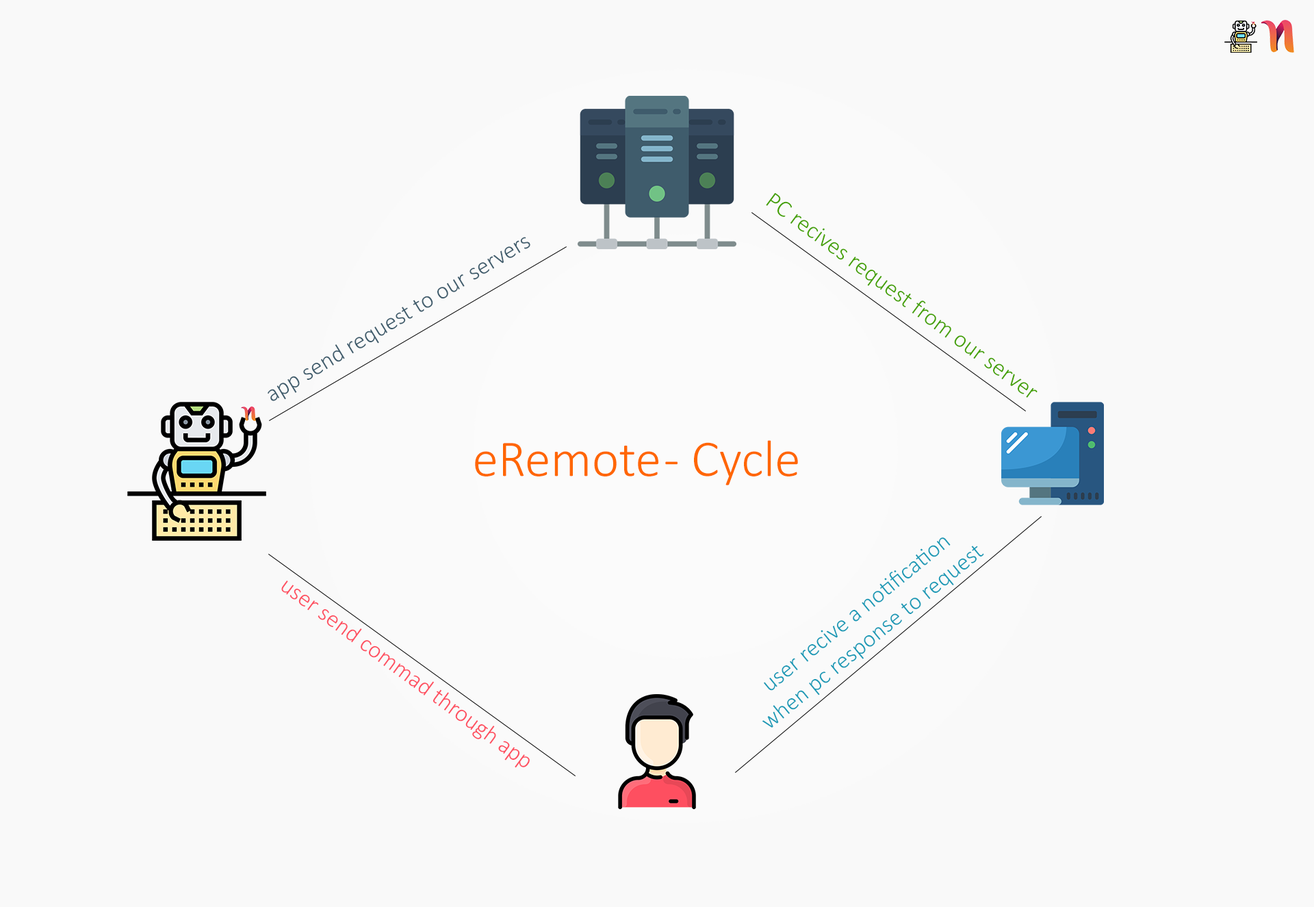
<style>
.page{position:relative;width:1314px;height:907px;background:#f9f9f9}
.page>*{position:absolute;margin:0}
.t1{font:24px "Calibri-Light";color:#44a100}
.t2{font:24px "Calibri-Light";color:#3f5c6c}
.t3{font:52px "Calibri-Light";color:#ff6600}
.t4{font:24px "Calibri-Light";color:#199ab6}
.t5{font:24px "Calibri-Light";color:#fe4f60}
</style>
<div class="page">
<p class="t1" style="left:766px;top:193px;width:272px;height:205px;rotate:36deg">PC recives request from our server</p>
<p class="t2" style="left:268px;top:237px;width:263px;height:164px;rotate:-31deg">app send request to our servers</p>
<p class="t3" style="left:475px;top:440px;width:323px;height:45px">eRemote - Cycle</p>
<p class="t4" style="left:763px;top:537px;width:222px;height:191px;text-align:center;rotate:-39deg">user recive a notification <br>when pc response to request</p>
<p class="t5" style="left:281px;top:581px;width:249px;height:187px;rotate:36deg">user send commad through app</p>
</div>
